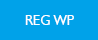
<style>
.page{position:relative;width:98px;height:40px;background:#00a2e9}
.page>*{position:absolute;margin:0}
.t1{font:13.9px "Humanist521BT-Roman";color:#ffffff}
</style>
<div class="page">
<p class="t1" style="left:25px;top:15px;width:49px;height:10px">REG WP</p>
</div>
